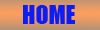
<style>
.page{position:relative;width:100px;height:30px}
.page>*{position:absolute;margin:0}
.t1{font:24px "Impact";color:#0d1df8}
</style>
<div class="page">
<p class="t1" style="left:23px;top:5px;width:52px;height:19px">HOME</p>
</div>
